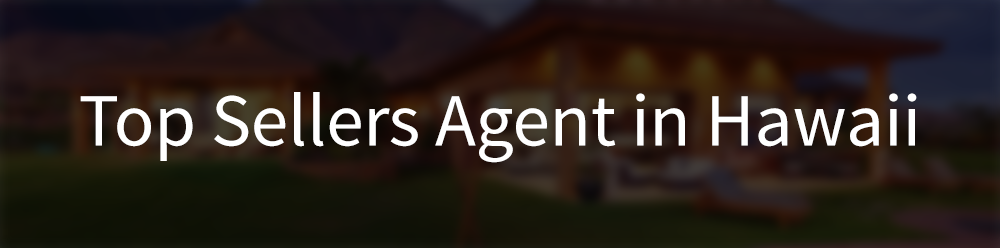
<style>
.page{position:relative;width:1000px;height:248px}
.page>*{position:absolute;margin:0}
.t1{font:75px "SourceSansPro-Regular";color:#ffffff}
</style>
<div class="page">
<p class="t1" style="left:80px;top:92px;width:837px;height:71px">Top Sellers Agent in Hawaii</p>
</div>
